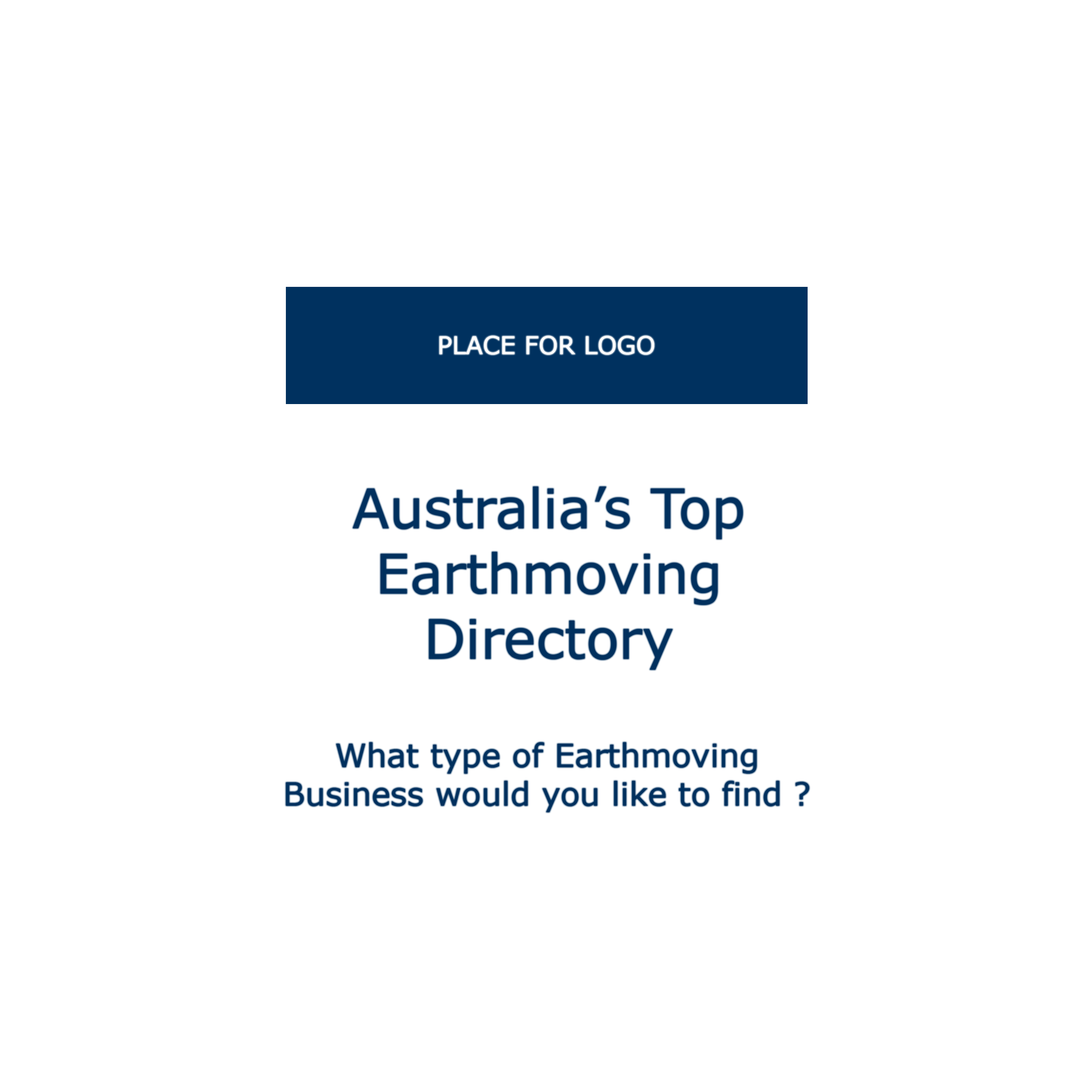
<style>
.page{position:relative;width:1092px;height:1092px;background:#ffffff}
.page>*{position:absolute;margin:0}
.t1{font:24.7px "Verdana";color:#ffffff}
.t2{font:54.4px "Verdana";color:#00305e}
.t3{font:32.1px "Verdana";color:#00305e}
</style>
<div class="page">
<p class="t1" style="left:439px;top:336px;width:215px;height:19px">PLACE FOR LOGO</p>
<p class="t2" style="left:353px;top:487px;width:390px;height:183px;text-align:center">Australia’s Top<br>Earthmoving<br>Directory</p>
<p class="t3" style="left:286px;top:742px;width:523px;height:70px;text-align:center">What type of Earthmoving<br>Business would you like to find ?</p>
</div>
